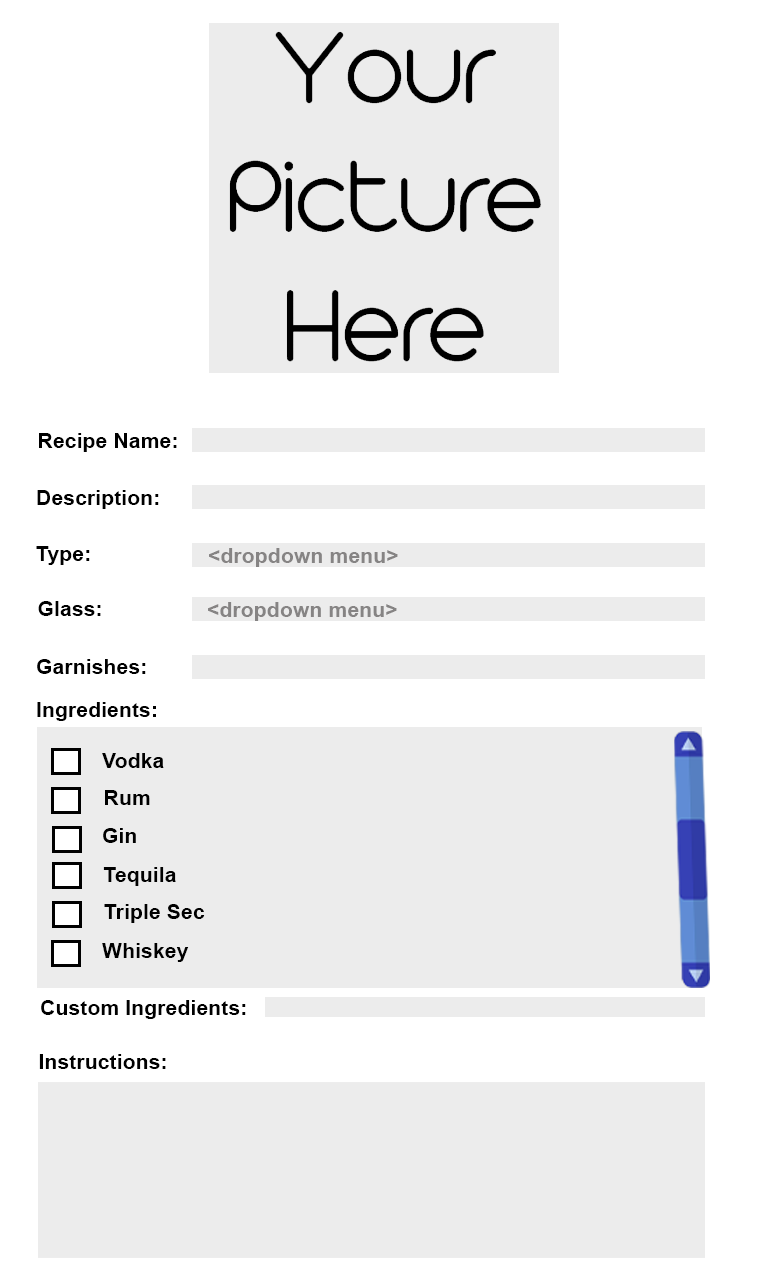
<style>
.page{position:relative;width:768px;height:1280px;background:#ffffff}
.page>*{position:absolute;margin:0}
.t1{font:21.3px "Arial-BoldMT";color:#000000}
.t2{font:21.3px "Arial-BoldMT";color:#868484}
</style>
<div class="page">
<p class="t1" style="left:39px;top:433px;width:138px;height:19px">Recipe Name:</p>
<p class="t1" style="left:37px;top:490px;width:122px;height:19px">Description:</p>
<p class="t1" style="left:36px;top:546px;width:54px;height:19px">Type:</p>
<p class="t2" style="left:209px;top:548px;width:189px;height:19px">&lt;dropdown menu&gt;</p>
<p class="t1" style="left:38px;top:601px;width:63px;height:15px">Glass:</p>
<p class="t2" style="left:208px;top:602px;width:189px;height:19px">&lt;dropdown menu&gt;</p>
<p class="t1" style="left:37px;top:659px;width:109px;height:15px">Garnishes:</p>
<p class="t1" style="left:37px;top:702px;width:119px;height:19px">Ingredients:</p>
<p class="t1" style="left:102px;top:753px;width:62px;height:15px">Vodka</p>
<p class="t1" style="left:105px;top:790px;width:45px;height:15px">Rum</p>
<p class="t1" style="left:103px;top:828px;width:33px;height:15px">Gin</p>
<p class="t1" style="left:103px;top:867px;width:73px;height:19px">Tequila</p>
<p class="t1" style="left:104px;top:904px;width:101px;height:19px">Triple Sec</p>
<p class="t1" style="left:102px;top:943px;width:87px;height:19px">Whiskey</p>
<p class="t1" style="left:41px;top:1000px;width:205px;height:19px">Custom Ingredients:</p>
<p class="t1" style="left:39px;top:1054px;width:127px;height:15px">Instructions:</p>
</div>
